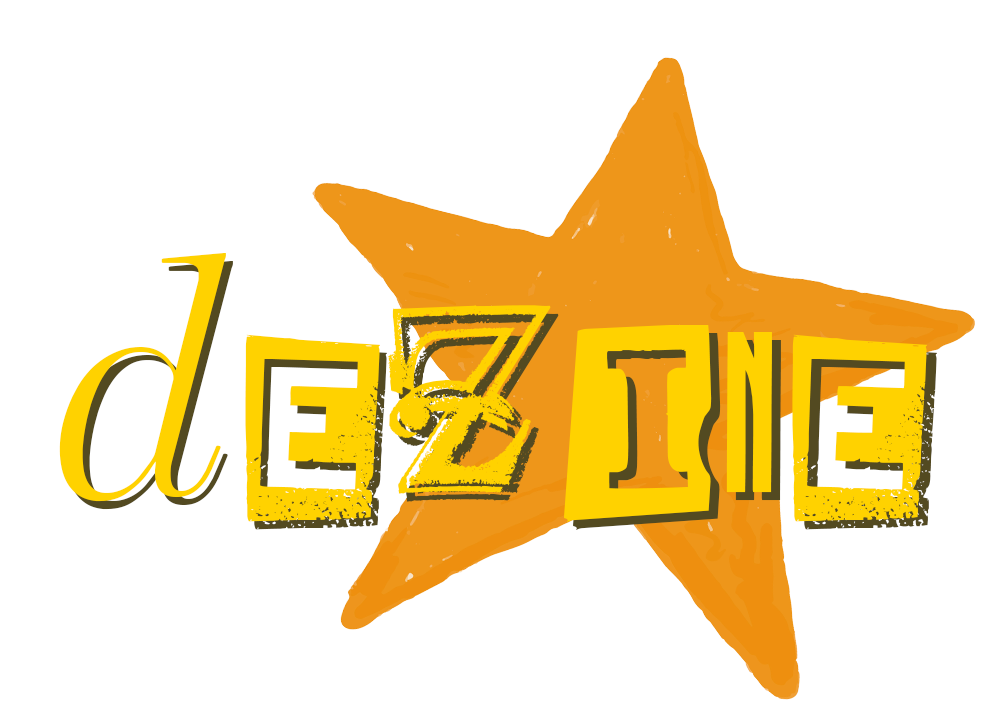
<style>
.page{position:relative;width:985px;height:724px;background:#ffffff}
.page>*{position:absolute;margin:0}
.t1{font:150.6px "RandomHouse";color:#ffd200}
.t2{font:151.3px "RandomHouse"}
</style>
<div class="page">
<p class="t1" style="left:59px;top:253px;width:868px;height:269px;text-align:center">DEZINE</p>
<p class="t2" style="left:66px;top:261px;width:871px;height:269px;text-align:center">DEZINE</p>
</div>
